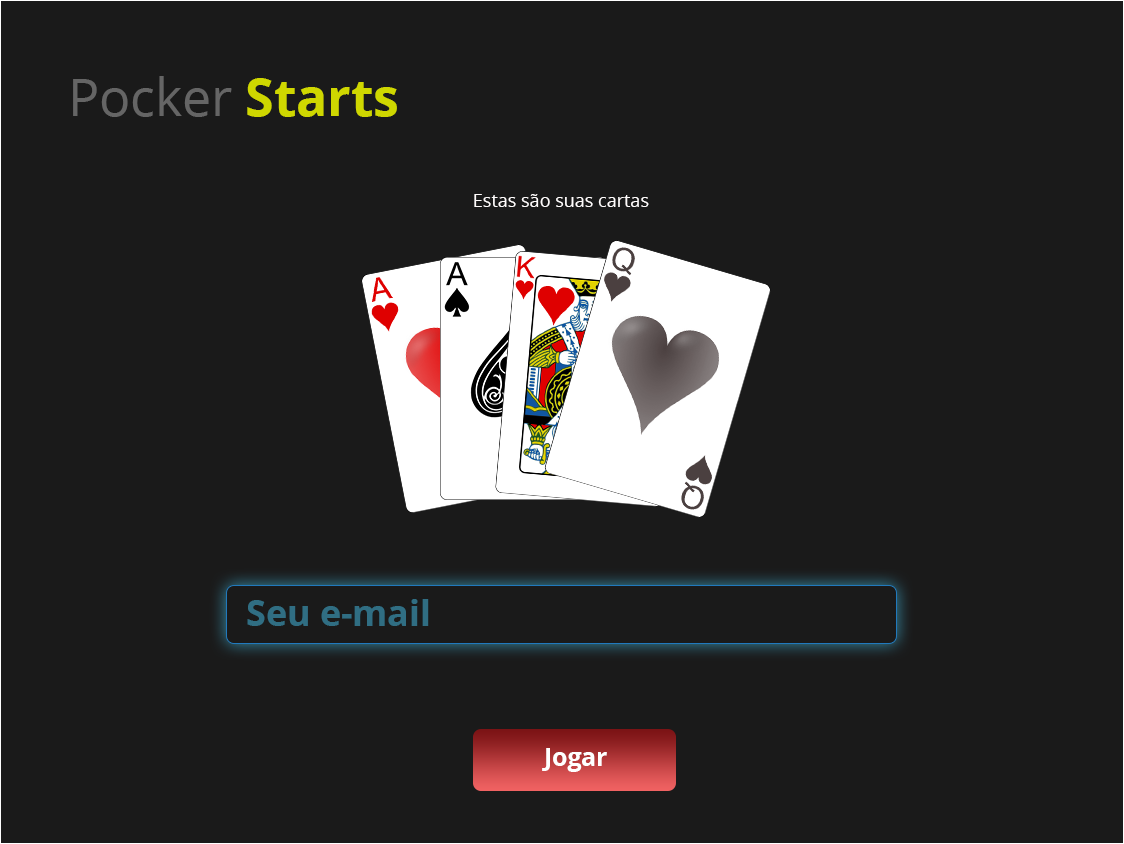
<style>
.page{position:relative;width:1124px;height:844px;background:#1a1a1a}
.page>*{position:absolute;margin:0}
.t1{font:51.7px "OpenSans";color:#656565}
.t2{font:51.7px "OpenSans-Bold";color:#cfd700}
.t3{font:18px "OpenSans";color:#fffbfb}
.t4{font:35.7px "OpenSans-Bold";color:#306e83}
.t5{font:24.6px "OpenSans-Bold";color:#ffffff}
</style>
<div class="page">
<p class="t1" style="left:73px;top:76px;width:324px;height:41px">Pocker <span class="t2">Starts</span></p>
<p class="t3" style="left:474px;top:194px;width:175px;height:13px">Estas são suas cartas</p>
<p class="t4" style="left:247px;top:599px;width:182px;height:27px">Seu e-mail</p>
<p class="t5" style="left:542px;top:748px;width:65px;height:24px">Jogar</p>
</div>
